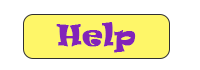
<style>
.page{position:relative;width:200px;height:70px;background:#ffffff}
.page>*{position:absolute;margin:0}
.t1{font:27px "Ravie";color:#8224b9;font-weight:bold}
</style>
<div class="page">
<p class="t1" style="left:56px;top:22px;width:80px;height:31px">Help</p>
</div>
